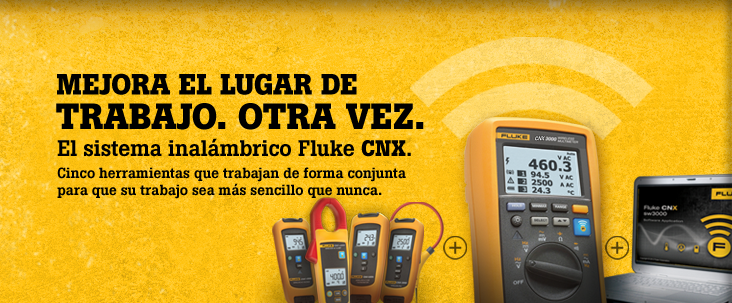
<style>
.page{position:relative;width:732px;height:303px}
.page>*{position:absolute;margin:0}
.t1{font:29px "BotonPro-Bold";letter-spacing:-0.005em;color:#000000;text-transform:uppercase}
.t2{font:36px "BotonPro-Bold";letter-spacing:-0.005em;color:#000000;text-transform:uppercase}
.t3{font:14.5px "BotonPro-Medium";letter-spacing:-0.01em;color:#000000}
.t4{font:22.4px "BotonPro-Medium";letter-spacing:-0.01em;color:#000000}
.t5{font:22.4px "BotonPro-Bold";letter-spacing:-0.01em;color:#000000}
</style>
<div class="page">
<p class="t1" style="left:57px;top:73px;width:300px;height:22px">Mejora el lugar de</p>
<p class="t2" style="left:56px;top:103px;width:368px;height:27px">trabajo. Otra vez.</p>
<p class="t3" style="left:57px;top:138px;width:354px;height:61px"><span class="t4">El sistema inalámbrico Fluke </span><span class="t5">CNX</span><span class="t4">.<br></span>Cinco herramientas que trabajan de forma conjunta para que su trabajo sea más sencillo que nunca.</p>
</div>
